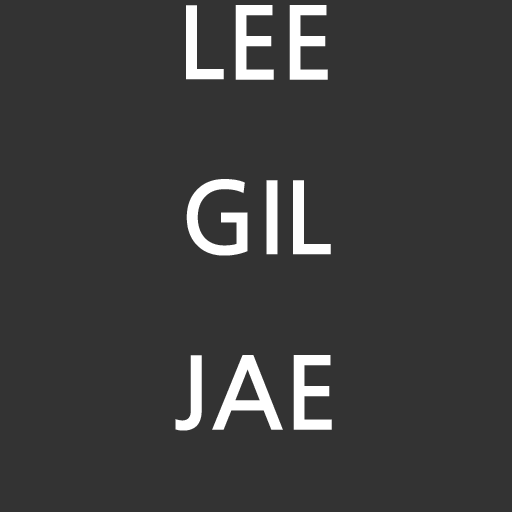
<style>
.page{position:relative;width:512px;height:512px;background:#333333}
.page>*{position:absolute;margin:0}
.t1{font:100px "JejuGothic";color:#ffffff}
</style>
<div class="page">
<p class="t1" style="left:175px;top:5px;width:157px;height:426px;text-align:center">LEE<br>GIL<br>JAE</p>
</div>
